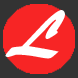
<style>
.page{position:relative;width:78px;height:78px;background:#f72525}
.page>*{position:absolute;margin:0}
.t1{font:66.7px "BrushScriptStd";color:#ffffff;scale:1.12 1}
</style>
<div class="page">
<p class="t1" style="left:5px;top:10px;width:60px;height:49px">L</p>
</div>
